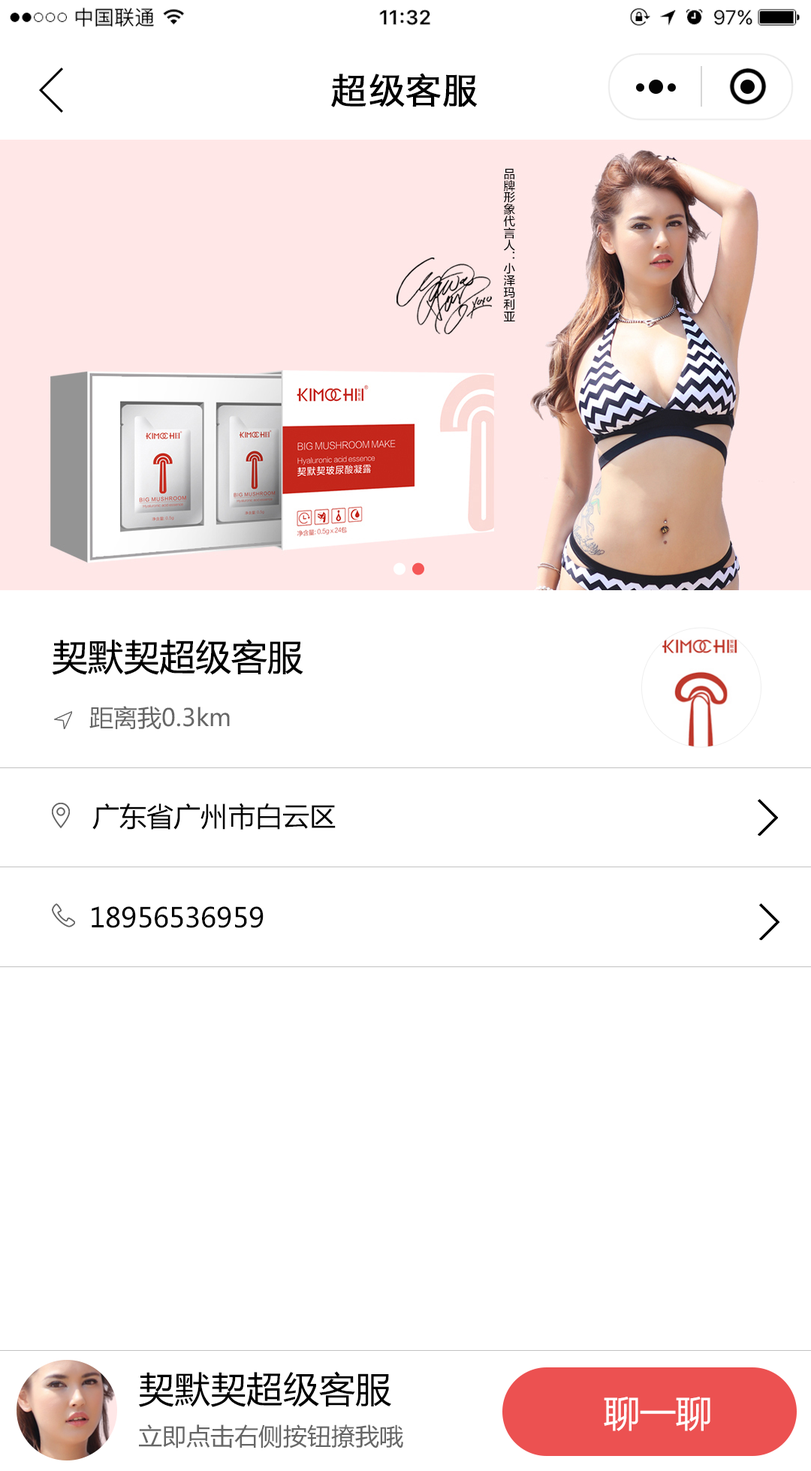
<style>
.page{position:relative;width:811px;height:1471px;background:#ffffff}
.page>*{position:absolute;margin:0}
.t1{font:36px "HiraginoSansGB-W3";color:#000000;font-weight:bold}
.t2{font:36px "MicrosoftYaHei";color:#000000}
.t3{font:24px "MicrosoftYaHei";color:#666666}
.t4{font:27px "MicrosoftYaHei";color:#000000}
.t5{font:36px "MicrosoftYaHei";color:#ffffff}
</style>
<div class="page">
<p class="t1" style="left:331px;top:73px;width:146px;height:34px">超级客服</p>
<p class="t2" style="left:52px;top:639px;width:251px;height:36px">契默契超级客服</p>
<p class="t3" style="left:89px;top:706px;width:141px;height:23px">距离我0.3km</p>
<p class="t4" style="left:92px;top:803px;width:244px;height:27px">广东省广州市白云区</p>
<p class="t4" style="left:92px;top:906px;width:172px;height:22px">18956536959</p>
<p class="t2" style="left:138px;top:1371px;width:253px;height:36px">契默契超级客服</p>
<p class="t5" style="left:604px;top:1396px;width:106px;height:35px">聊一聊</p>
<p class="t3" style="left:139px;top:1424px;width:264px;height:24px">立即点击右侧按钮撩我哦</p>
</div>
